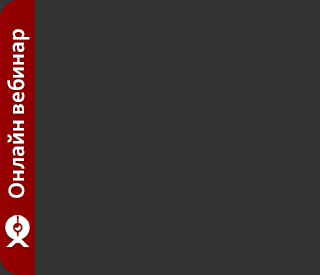
<style>
.page{position:relative;width:320px;height:275px;background:#333333}
.page>*{position:absolute;margin:0}
.t1{font:23.2px "Corbel-Bold";color:#ffffff}
</style>
<div class="page">
<p class="t1" style="left:7px;top:29px;width:23px;height:169px;rotate:-90deg">Онлайн вебинар</p>
</div>
